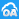
<style>
.page{position:relative;width:19px;height:19px}
.page>*{position:absolute;margin:0}
.t1{font:9.2px "Jpangtouyu";letter-spacing:-0.03em;color:#e7e7e8;font-weight:bold;scale:0.97 1}
</style>
<div class="page">
<p class="t1" style="left:3px;top:9px;width:15px;height:8px">OA</p>
</div>
